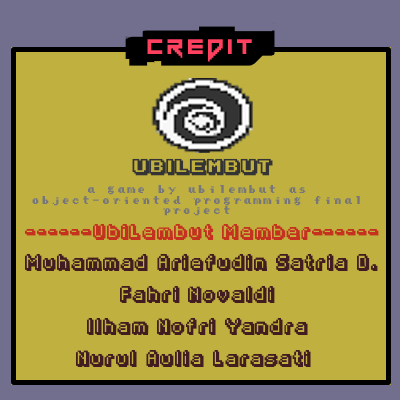
<style>
.page{position:relative;width:400px;height:400px;background:#bfb040}
.page>*{position:absolute;margin:0}
.t1{font:16.9px "KarmaticArcade";letter-spacing:0.12em;color:#343434}
.t2{font:9px "PressStartReg";letter-spacing:0.12em;color:#777777}
.t3{font:12.9px "Fipps-Regular";letter-spacing:0.12em;color:#c4321f}
.t4{font:13px/32.2px "Fipps-Regular";letter-spacing:0.12em;color:#431c22}
</style>
<div class="page">
<p class="t1" style="left:132px;top:158px;width:141px;height:18px">UbiLembut</p>
<p class="t2" style="left:32px;top:185px;width:328px;height:31px;text-align:center">a game by ubilembut as object-oriented programming final project</p>
<p class="t3" style="left:25px;top:224px;width:354px;height:16px">------UbiLembut Member------</p>
<p class="t4" style="left:25px;top:254px;width:353px;height:113px;text-align:center">Muhammad Ariefudin Satria D.<br>Fahri Novaldi<br>Ilham Nofri Yandra<br>Nurul Aulia Larasati</p>
</div>
